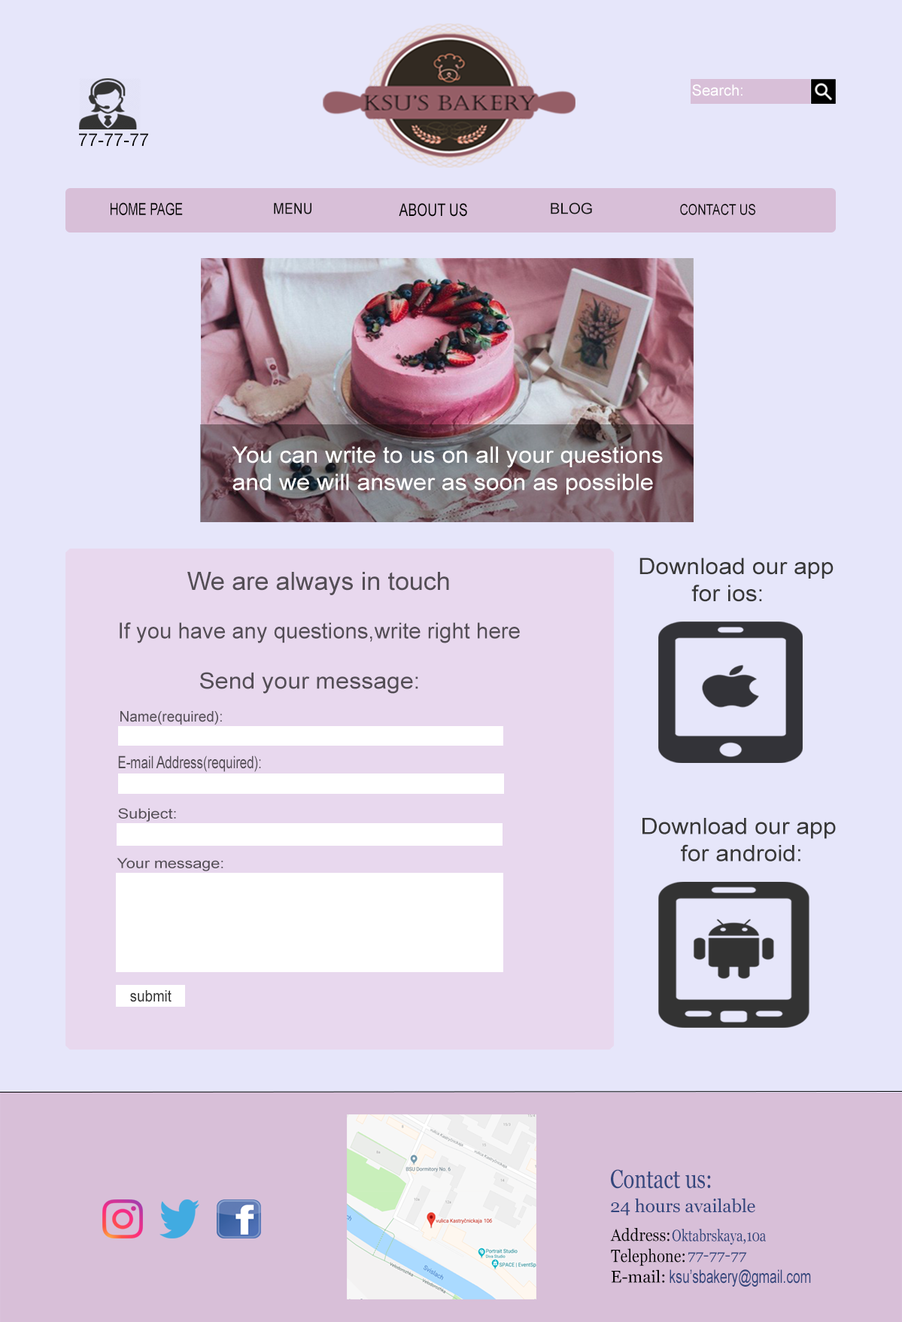
<style>
.page{position:relative;width:902px;height:1322px;background:#e6e6fa}
.page>*{position:absolute;margin:0}
.t1{font:15.1px "ArialMT";color:#ffffff}
.t2{font:17.5px "ArialMT";color:#050505}
.t3{font:16.7px "ArialMT";color:#050505;scale:0.73 1}
.t4{font:20.9px "ClarendonBT-Roman";color:#050505;scale:0.73 1}
.t5{font:15.1px "ArialMT";color:#121212;scale:0.89 1}
.t6{font:17.4px "ArialMT";color:#050505;scale:0.78 1}
.t7{font:15px "ArialMT";color:#171717;scale:1.03 1}
.t8{font:14.8px "ArialMT";color:#080808;scale:0.8 1}
.t9{font:22.6px "ArialMT";color:#ffffff;scale:1.07 1}
.t10{font:22.6px "ArialMT";color:#383838;scale:1.07 1}
.t11{font:25.2px "ArialMT";color:#544e56}
.t12{font:22px "ArialMT";color:#544e56}
.t13{font:22.6px "ArialMT";color:#544e56;scale:1.07 1}
.t14{font:14.7px "ArialMT";color:#544e56}
.t15{font:17.2px "ArialMT";color:#544e56;scale:0.74 1}
.t16{font:13.7px "ArialMT";color:#544e56;scale:1.2 1}
.t17{font:13.9px "ArialMT";color:#544e56;scale:1.17 1}
.t18{font:15.8px "ArialMT";color:#383838;scale:0.9 1}
.t19{font:25.7px "Georgia";color:#33467d;scale:0.8 1}
.t20{font:18.1px "Georgia";color:#33467d}
.t21{font:17px "Georgia";color:#050505;scale:0.9 1}
.t22{font:16.2px "Georgia";color:#33467d;scale:0.79 1}
.t23{font:17.6px "Georgia";color:#050505;scale:0.86 1}
.t24{font:13.5px "Georgia";color:#33467d;scale:1.16 1}
.t25{font:16.8px "Georgia";color:#050505}
.t26{font:18.2px "ArialMT";color:#33467d;scale:0.72 1}
</style>
<div class="page">
<p class="t1" style="left:692px;top:84px;width:51px;height:12px">Search:</p>
<p class="t2" style="left:79px;top:133px;width:69px;height:13px">77-77-77</p>
<p class="t3" style="left:111px;top:202px;width:72px;height:13px"><span class="t4"> </span>HOME PAGE</p>
<p class="t5" style="left:274px;top:202px;width:37px;height:12px">MENU</p>
<p class="t6" style="left:399px;top:203px;width:68px;height:14px">ABOUT US</p>
<p class="t7" style="left:551px;top:202px;width:41px;height:12px">BLOG</p>
<p class="t8" style="left:680px;top:204px;width:75px;height:11px">CONTACT US</p>
<p class="t9" style="left:232px;top:446px;width:431px;height:49px">You can write to us on all your questions <br>and we will answer as soon as possible</p>
<p class="t10" style="left:639px;top:557px;width:195px;height:45px">Download our app<br>        for ios:</p>
<p class="t11" style="left:187px;top:572px;width:262px;height:23px">We are always in touch</p>
<p class="t12" style="left:120px;top:622px;width:400px;height:21px">If you have any questions,write right here</p>
<p class="t13" style="left:200px;top:672px;width:218px;height:22px">Send your message:</p>
<p class="t14" style="left:120px;top:711px;width:102px;height:14px">Name(required):</p>
<p class="t15" style="left:118px;top:755px;width:143px;height:17px">E-mail Address(required):</p>
<p class="t16" style="left:118px;top:808px;width:58px;height:14px">Subject:</p>
<p class="t10" style="left:643px;top:818px;width:193px;height:43px">Download our app<br>      for android:</p>
<p class="t17" style="left:117px;top:858px;width:106px;height:13px">Your message:</p>
<p class="t18" style="left:130px;top:990px;width:42px;height:12px">submit</p>
<p class="t19" style="left:611px;top:1169px;width:100px;height:20px">Contact us:</p>
<p class="t20" style="left:611px;top:1198px;width:144px;height:18px">24 hours available</p>
<p class="t21" style="left:610px;top:1228px;width:60px;height:13px">Address:</p>
<p class="t22" style="left:672px;top:1229px;width:94px;height:16px">Oktabrskaya,10a</p>
<p class="t23" style="left:611px;top:1248px;width:74px;height:18px">Telephone:</p>
<p class="t24" style="left:688px;top:1252px;width:59px;height:10px">77-77-77</p>
<p class="t25" style="left:611px;top:1269px;width:54px;height:14px">E-mail:</p>
<p class="t26" style="left:670px;top:1269px;width:141px;height:18px">ksu’sbakery@gmail.com</p>
</div>
